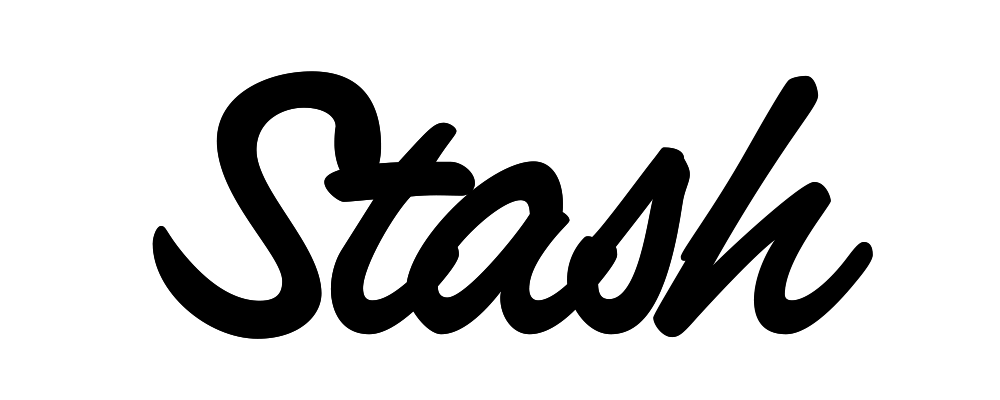
<style>
.page{position:relative;width:1000px;height:400px;background:#ffffff}
.page>*{position:absolute;margin:0}
.t1{font:411.1px "FilmotypeLucky-Regular";letter-spacing:-0.04em;color:#000000}
</style>
<div class="page">
<p class="t1" style="left:152px;top:71px;width:721px;height:268px">Stash</p>
</div>
